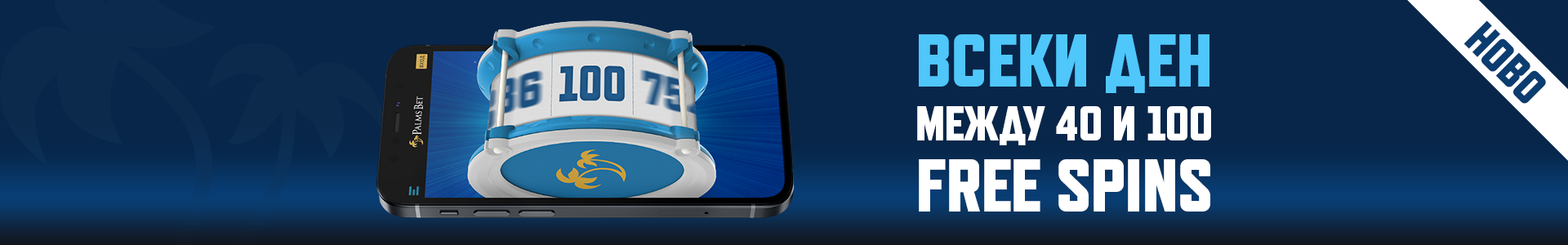
<style>
.page{position:relative;width:1568px;height:245px;background:#08264a}
.page>*{position:absolute;margin:0}
.t1{font:46.5px "RefrigeratorDeluxe-Heavy";color:#0b3d70}
.t2{font:74.8px "RefrigeratorDeluxe-Heavy";color:#4fc7fb}
.t3{font:48.8px "RefrigeratorDeluxe-Heavy";color:#ffffff}
.t4{font:74.8px "RefrigeratorDeluxe-Heavy";letter-spacing:-0.006em;color:#ffffff}
</style>
<div class="page">
<p class="t1" style="left:1463px;top:20px;width:83px;height:84px;rotate:45deg">НОВО</p>
<p class="t2" style="left:919px;top:34px;width:290px;height:59px">ВСЕКИ ДЕН</p>
<p class="t3" style="left:917px;top:106px;width:294px;height:39px">МЕЖДУ 40 И 100</p>
<p class="t4" style="left:919px;top:159px;width:291px;height:53px">FREE SPINS</p>
</div>
